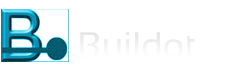
<style>
.page{position:relative;width:228px;height:69px;background:#ffffff}
.page>*{position:absolute;margin:0}
.t1{font:37.2px "Sansation";color:#f4f4f4}
</style>
<div class="page">
<p class="t1" style="left:80px;top:32px;width:115px;height:27px">Buildot</p>
</div>
